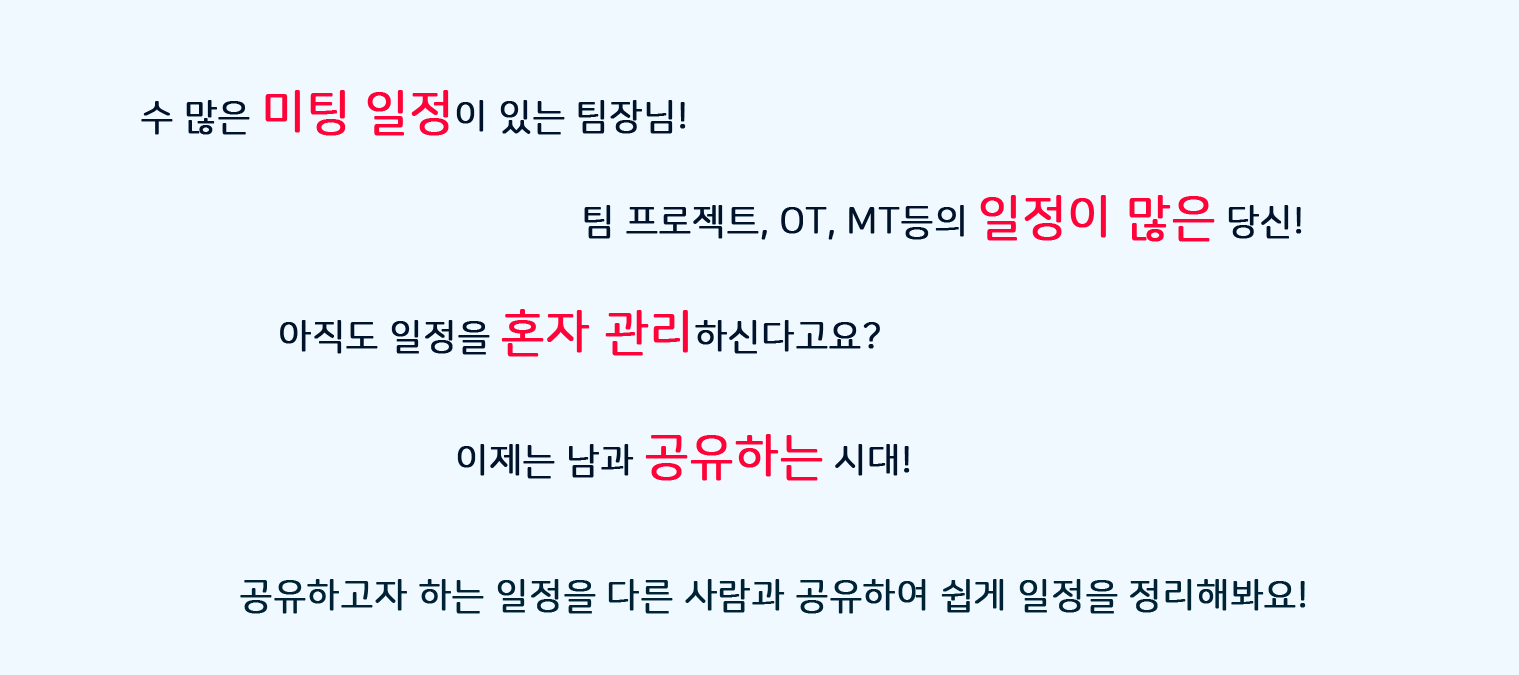
<style>
.page{position:relative;width:1519px;height:675px;background:#eff9ff}
.page>*{position:absolute;margin:0}
.t1{font:36px "NanumSquareRoundR";color:#00132b;font-weight:bold}
.t2{font:48px "NanumSquareRoundR";color:#ff0238;font-weight:bold}
.t3{font:36px "NanumSquareRoundR";color:#002235;font-weight:bold}
</style>
<div class="page">
<p class="t1" style="left:141px;top:90px;width:545px;height:46px">수 많은 <span class="t2">미팅 일정</span>이 있는 팀장님!</p>
<p class="t1" style="left:584px;top:195px;width:718px;height:47px">팀 프로젝트, OT, MT등의 <span class="t2">일정이 많은</span> 당신!</p>
<p class="t1" style="left:280px;top:309px;width:600px;height:48px">아직도 일정을 <span class="t2">혼자 관리</span>하신다고요?</p>
<p class="t1" style="left:457px;top:434px;width:453px;height:47px">이제는 남과 <span class="t2">공유하는</span> 시대!</p>
<p class="t3" style="left:240px;top:579px;width:1066px;height:35px">공유하고자 하는 일정을 다른 사람과 공유하여 쉽게 일정을 정리해봐요!</p>
</div>
